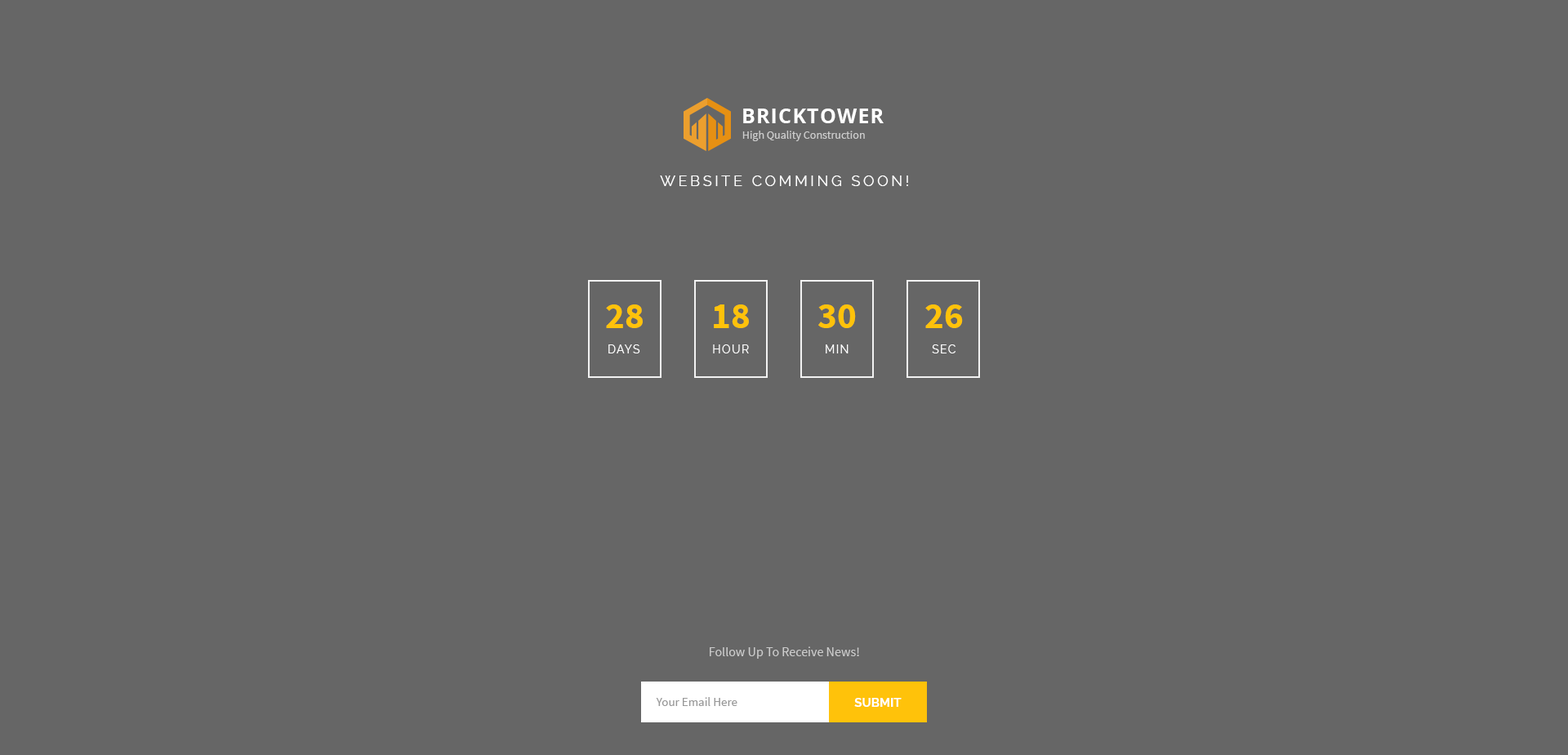
<style>
.page{position:relative;width:1568px;height:755px;background:#666666}
.page>*{position:absolute;margin:0}
.t1{font:20.4px "OpenSans-Bold";letter-spacing:0.05em;color:#ffffff;text-transform:uppercase}
.t2{font:11.4px "SourceSansPro-Regular";color:#cccccc}
.t3{font:14.7px "Raleway-Regular";letter-spacing:0.2em;color:#ffffff;text-transform:uppercase}
.t4{font:36.8px "SourceSansPro-Bold";color:#ffc20a;text-transform:uppercase}
.t5{font:11.4px "Raleway-Regular";letter-spacing:0.1em;color:#ffffff;text-transform:uppercase}
.t6{font:13.1px "SourceSansPro-Regular";color:#cccccc}
.t7{font:12.2px "SourceSansPro-Regular";color:#999999}
.t8{font:12.2px "Raleway-Bold";color:#ffffff;text-transform:uppercase}
</style>
<div class="page">
<p class="t1" style="left:743px;top:109px;width:141px;height:14px">BrickTower</p>
<p class="t2" style="left:742px;top:131px;width:123px;height:10px">High Quality Construction</p>
<p class="t3" style="left:660px;top:176px;width:248px;height:10px">Website Comming Soon!</p>
<p class="t4" style="left:606px;top:305px;width:37px;height:23px">28</p>
<p class="t4" style="left:714px;top:305px;width:35px;height:23px">18</p>
<p class="t4" style="left:818px;top:305px;width:38px;height:23px">30</p>
<p class="t4" style="left:925px;top:305px;width:38px;height:23px">26</p>
<p class="t5" style="left:608px;top:345px;width:32px;height:9px">Days</p>
<p class="t5" style="left:713px;top:345px;width:36px;height:9px">Hour</p>
<p class="t5" style="left:826px;top:345px;width:23px;height:9px">Min</p>
<p class="t5" style="left:932px;top:345px;width:24px;height:9px">Sec</p>
<p class="t6" style="left:710px;top:647px;width:149px;height:12px">Follow Up To Receive News!</p>
<p class="t7" style="left:656px;top:697px;width:81px;height:9px">Your Email Here</p>
<p class="t8" style="left:854px;top:698px;width:48px;height:9px">Submit</p>
</div>
